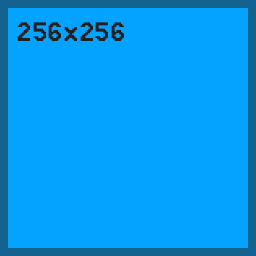
<style>
.page{position:relative;width:256px;height:256px;background:#03a3ff}
.page>*{position:absolute;margin:0}
.t1{font:33.3px "8514oem";color:#222121}
</style>
<div class="page">
<p class="t1" style="left:17px;top:22px;width:107px;height:19px">256x256</p>
</div>
